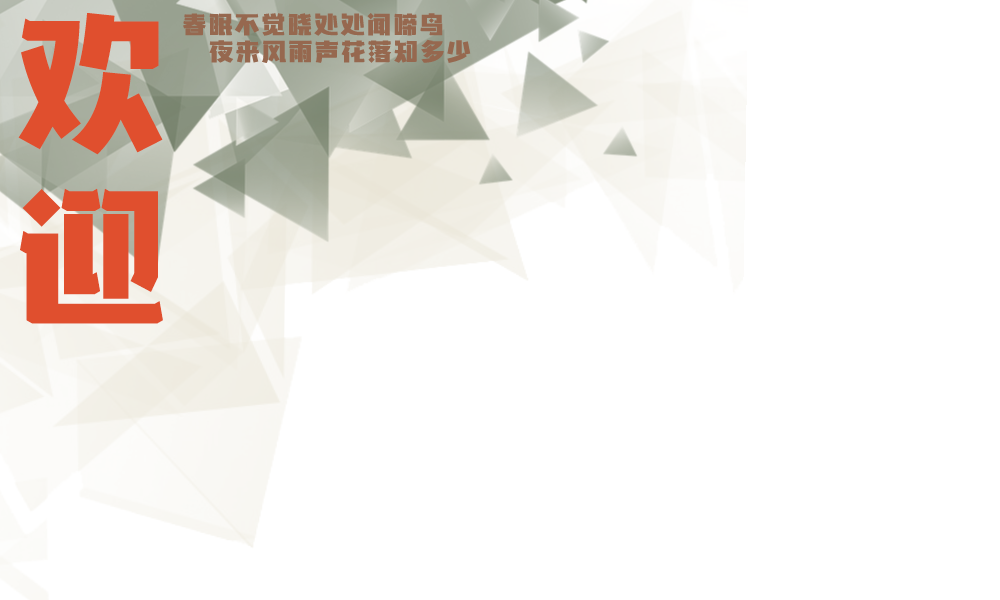
<style>
.page{position:relative;width:1000px;height:600px;background:#ffffff}
.page>*{position:absolute;margin:0}
.t1{font:150px/76px "BenmoJinhei";letter-spacing:0.1em;color:#e04f2e}
.t2{font:150px/175px "BenmoJinhei";letter-spacing:0.1em;color:#e04f2e}
.t3{font:24px "BenmoJinhei";letter-spacing:0.1em;color:#96684f}
</style>
<div class="page">
<p class="t1" style="left:18px;top:13px;width:145px;height:311px;text-align:center">欢<br><span class="t2">迎</span></p>
<p class="t3" style="left:183px;top:13px;width:260px;height:23px">春眠不觉晓处处闻啼鸟</p>
<p class="t3" style="left:209px;top:39px;width:262px;height:24px">夜来风雨声花落知多少</p>
</div>
